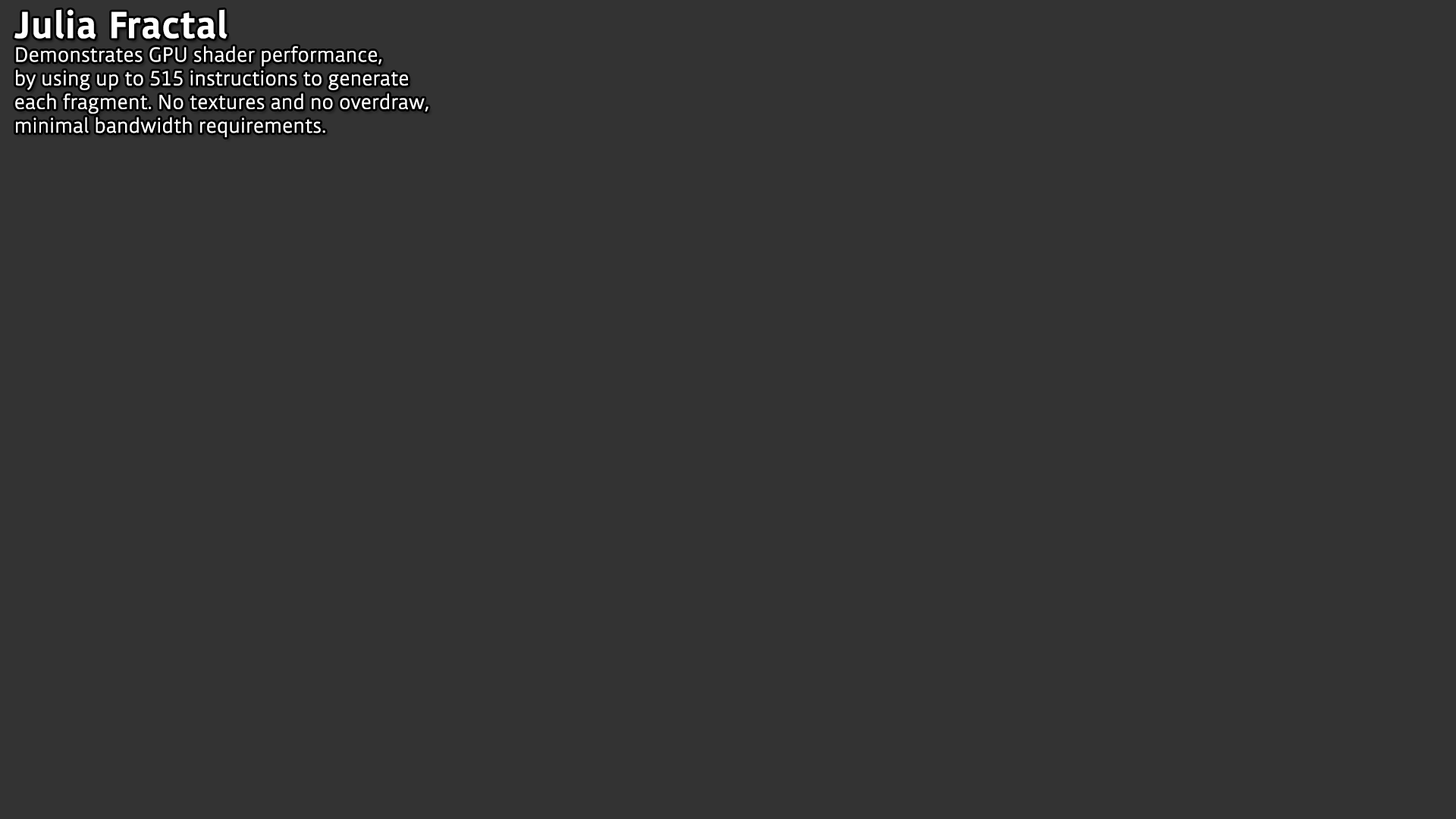
<style>
.page{position:relative;width:1456px;height:819px;background:#333333}
.page>*{position:absolute;margin:0}
.t1{font:19.7px "Tipperary";color:#ffffff;font-weight:bold}
.t2{font:36.4px "Tipperary-Bold";color:#ffffff;font-weight:bold}
</style>
<div class="page">
<p class="t1" style="left:14px;top:9px;width:414px;height:128px"><span class="t2">Julia Fractal<br></span>Demonstrates GPU shader performance, <br>by using up to 515 instructions to generate <br>each fragment. No textures and no overdraw,<br>minimal bandwidth requirements.</p>
</div>
